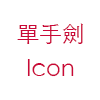
<style>
.page{position:relative;width:100px;height:100px;background:#ffffff}
.page>*{position:absolute;margin:0}
.t1{font:22.6px "STHeitiTC-Light";color:#ca0838}
</style>
<div class="page">
<p class="t1" style="left:17px;top:23px;width:66px;height:21px">單手劍</p>
<p class="t1" style="left:27px;top:59px;width:47px;height:18px">Icon</p>
</div>
